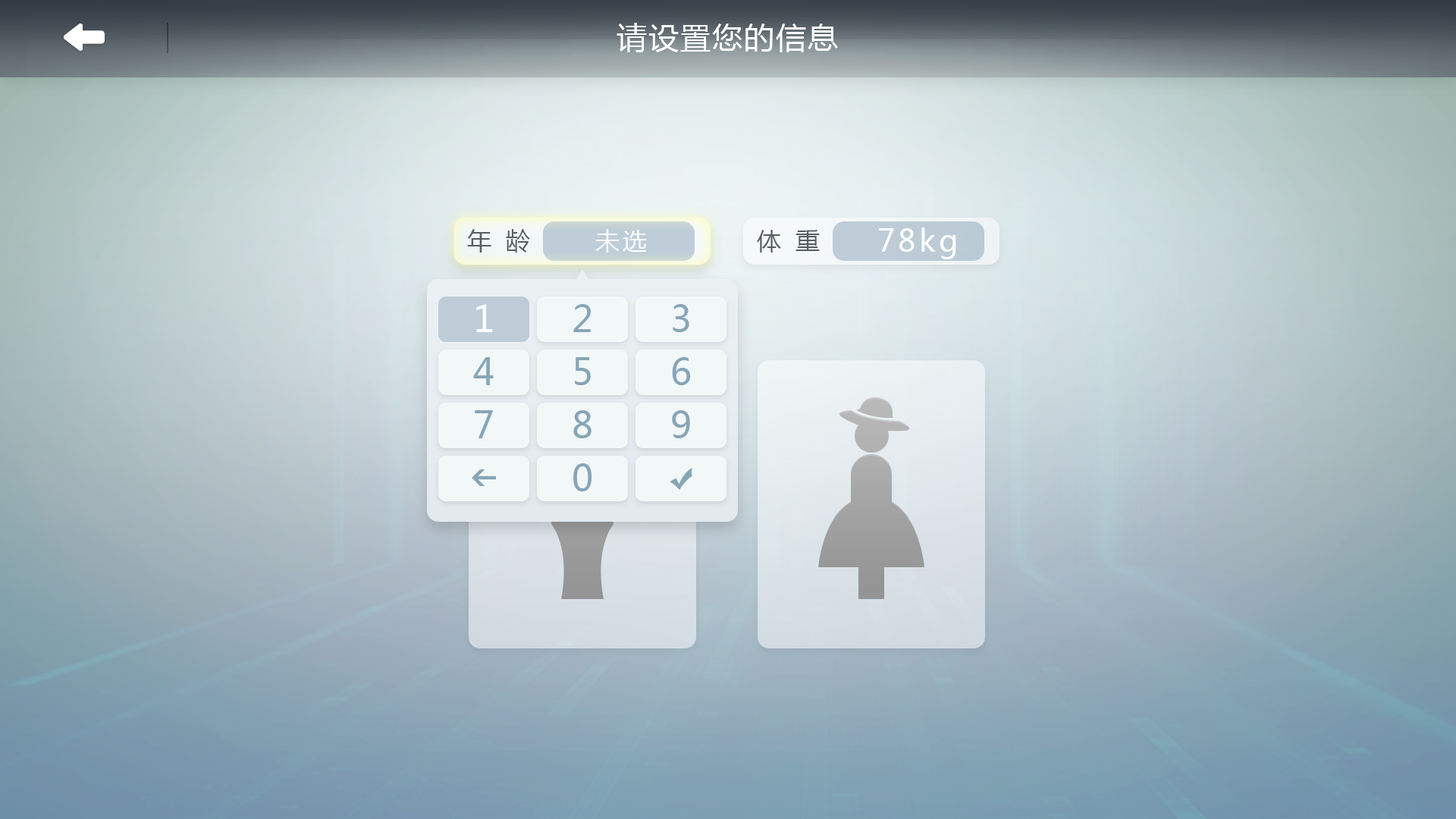
<style>
.page{position:relative;width:1456px;height:819px}
.page>*{position:absolute;margin:0}
.t1{font:30.3px "MicrosoftYaHei";letter-spacing:0.05em;color:#ffffff}
.t2{font:24.3px "MicrosoftYaHei";color:#565e63}
.t3{font:24.3px "MicrosoftYaHei";letter-spacing:0.1em;color:#ffffff}
.t4{font:30.3px "MicrosoftYaHei";letter-spacing:0.1em;color:#ffffff}
</style>
<div class="page">
<p class="t1" style="left:617px;top:23px;width:221px;height:29px">请设置您的信息</p>
<p class="t2" style="left:467px;top:229px;width:63px;height:24px">年  龄</p>
<p class="t3" style="left:595px;top:229px;width:52px;height:24px">未选</p>
<p class="t2" style="left:757px;top:230px;width:63px;height:23px">体  重</p>
<p class="t4" style="left:878px;top:227px;width:78px;height:32px">78kg</p>
</div>
